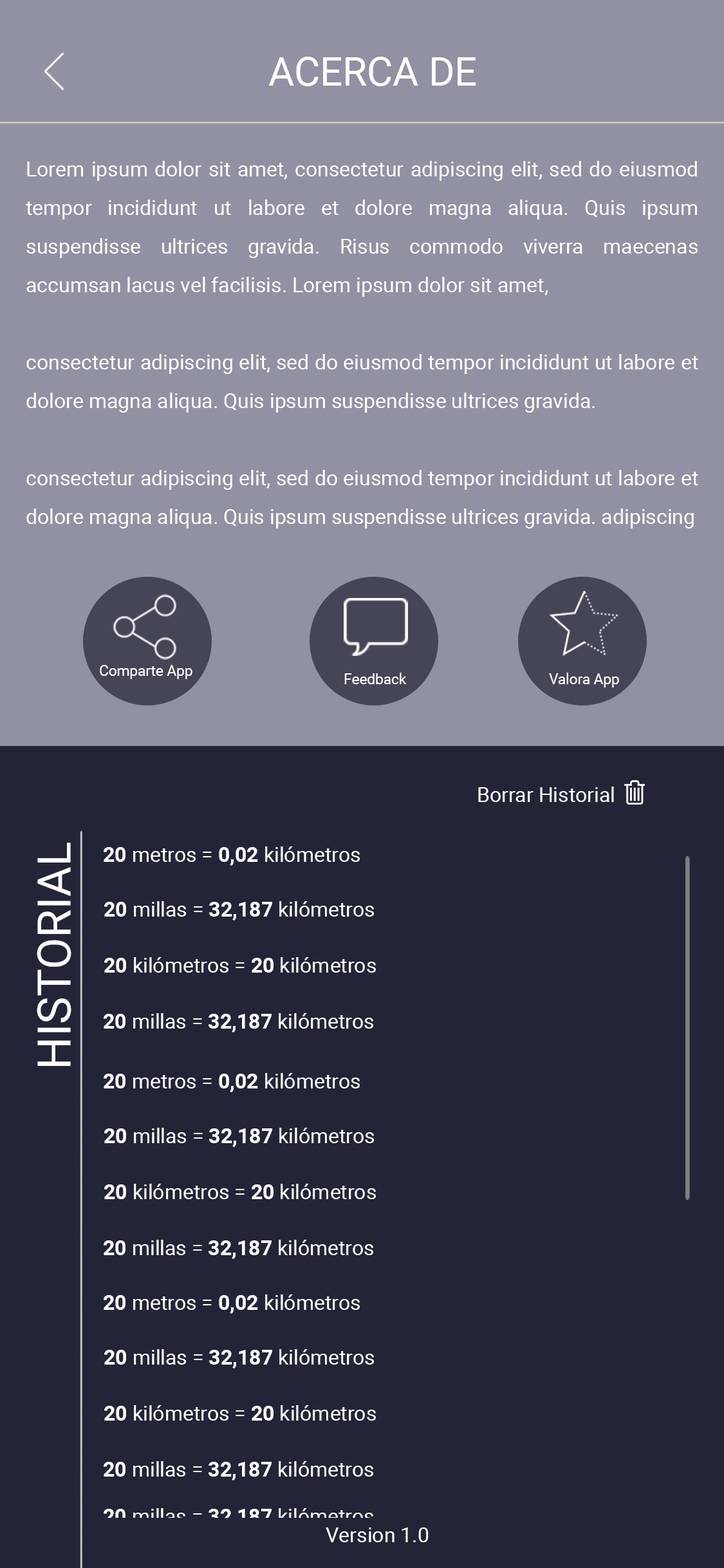
<style>
.page{position:relative;width:724px;height:1568px;background:#212537}
.page>*{position:absolute;margin:0}
.t1{font:39.7px "Roboto-Regular";color:#ffffff}
.t2{font:20.6px/38.6px "Roboto-Regular";color:#ffffff}
.t3{font:14.5px "Roboto-Regular";color:#ffffff}
.t4{font:20.6px "Roboto-Regular";color:#ffffff}
.t5{font:46.2px "Roboto-Regular";color:#ffffff;text-transform:uppercase}
.t6{font:20.6px "Roboto-Bold";color:#ffffff}
.t7{font:20.6px "Roboto-Regular"}
.t8{font:20.6px "Roboto-Bold"}
</style>
<div class="page">
<p class="t1" style="left:268px;top:57px;width:208px;height:29px">ACERCA DE</p>
<p class="t2" style="left:26px;top:161px;width:672px;height:367px;text-align:justify">Lorem ipsum dolor sit amet, consectetur adipiscing elit, sed do eiusmod tempor incididunt ut labore et dolore magna aliqua. Quis ipsum suspendisse ultrices gravida. Risus commodo viverra maecenas accumsan lacus vel facilisis. Lorem ipsum dolor sit amet, <br><br>consectetur adipiscing elit, sed do eiusmod tempor incididunt ut labore et dolore magna aliqua. Quis ipsum suspendisse ultrices gravida. <br><br>consectetur adipiscing elit, sed do eiusmod tempor incididunt ut labore et dolore magna aliqua. Quis ipsum suspendisse ultrices gravida. adipiscing</p>
<p class="t3" style="left:100px;top:665px;width:92px;height:14px">Comparte App</p>
<p class="t3" style="left:344px;top:673px;width:63px;height:11px">Feedback</p>
<p class="t3" style="left:549px;top:673px;width:70px;height:14px">Valora App</p>
<p class="t4" style="left:478px;top:787px;width:136px;height:15px">Borrar Historial</p>
<p class="t5" style="left:37px;top:843px;width:34px;height:223px;rotate:-90deg">Historial</p>
<p class="t4" style="left:104px;top:846px;width:256px;height:20px"><span class="t6">20</span> metros = <span class="t6">0,02</span> kilómetros</p>
<p class="t4" style="left:104px;top:901px;width:270px;height:19px"><span class="t6">20</span> millas = <span class="t6">32,187 </span>kilómetros</p>
<p class="t4" style="left:104px;top:957px;width:272px;height:16px"><span class="t6">20</span> kilómetros = <span class="t6">20</span> kilómetros</p>
<p class="t4" style="left:104px;top:1013px;width:269px;height:19px"><span class="t6">20</span> millas = <span class="t6">32,187</span> kilómetros</p>
<p class="t4" style="left:104px;top:1073px;width:256px;height:19px"><span class="t6">20</span> metros = <span class="t6">0,02</span> kilómetros</p>
<p class="t4" style="left:104px;top:1128px;width:270px;height:19px"><span class="t6">20</span> millas = <span class="t6">32,187 </span>kilómetros</p>
<p class="t4" style="left:104px;top:1184px;width:272px;height:15px"><span class="t6">20</span> kilómetros = <span class="t6">20</span> kilómetros</p>
<p class="t4" style="left:104px;top:1240px;width:269px;height:19px"><span class="t6">20</span> millas = <span class="t6">32,187</span> kilómetros</p>
<p class="t4" style="left:104px;top:1294px;width:256px;height:20px"><span class="t6">20</span> metros = <span class="t6">0,02</span> kilómetros</p>
<p class="t4" style="left:104px;top:1349px;width:270px;height:19px"><span class="t6">20</span> millas = <span class="t6">32,187 </span>kilómetros</p>
<p class="t4" style="left:104px;top:1405px;width:272px;height:16px"><span class="t6">20</span> kilómetros = <span class="t6">20</span> kilómetros</p>
<p class="t4" style="left:104px;top:1461px;width:269px;height:19px"><span class="t6">20</span> millas = <span class="t6">32,187</span> kilómetros</p>
<p class="t7" style="left:104px;top:1508px;width:269px;height:19px"><span class="t8">20</span> millas = <span class="t8">32,187</span> kilómetros</p>
<p class="t4" style="left:326px;top:1527px;width:103px;height:15px">Version 1.0</p>
</div>
